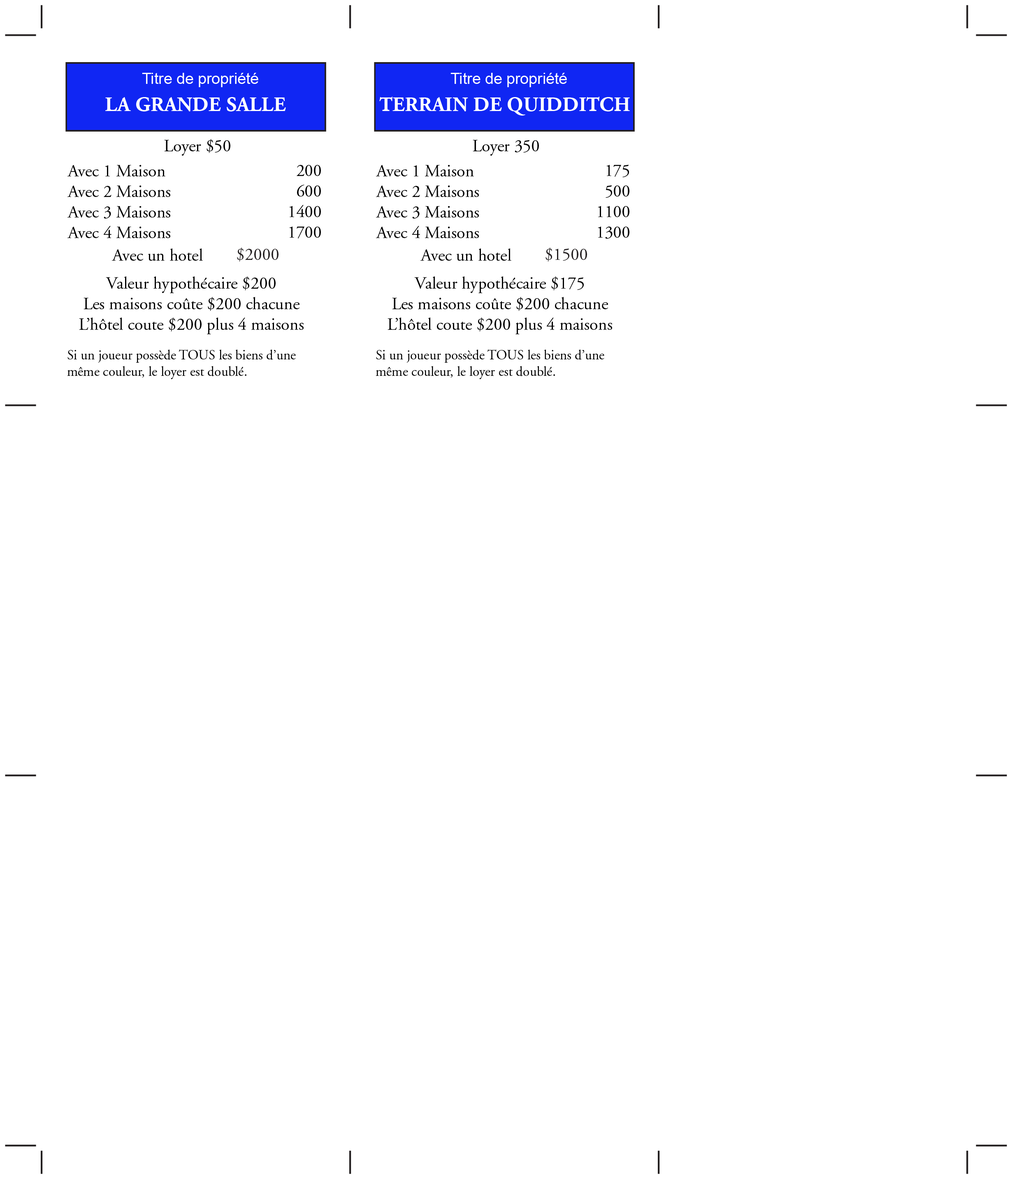
<style>
.page{position:relative;width:1012px;height:1179px;background:#ffffff}
.page>*{position:absolute;margin:0}
.t1{font:17.1px "AGaramond-Regular";color:#000000}
.t2{font:13.7px "AGaramond-Regular";color:#000000}
</style>
<div class="page">
<p class="t1" style="left:164px;top:139px;width:66px;height:17px">Loyer $50</p>
<p class="t1" style="left:472px;top:140px;width:67px;height:16px">Loyer 350</p>
<p class="t1" style="left:67px;top:165px;width:103px;height:73px">Avec 1 Maison<br>Avec 2 Maisons<br>Avec 3 Maisons<br>Avec 4 Maisons</p>
<p class="t1" style="left:289px;top:165px;width:32px;height:73px;text-align:right">200<br>600<br>1400<br>1700</p>
<p class="t1" style="left:376px;top:165px;width:103px;height:73px">Avec 1 Maison<br>Avec 2 Maisons<br>Avec 3 Maisons<br>Avec 4 Maisons</p>
<p class="t1" style="left:597px;top:164px;width:32px;height:75px;text-align:right">175<br>500<br>1100<br>1300</p>
<p class="t1" style="left:112px;top:248px;width:91px;height:13px">Avec un hotel</p>
<p class="t1" style="left:420px;top:248px;width:91px;height:13px">Avec un hotel</p>
<p class="t1" style="left:79px;top:276px;width:224px;height:58px;text-align:center">Valeur hypothécaire $200<br>Les maisons coûte $200 chacune<br>L’hôtel coute $200 plus 4 maisons</p>
<p class="t1" style="left:387px;top:276px;width:225px;height:58px;text-align:center">Valeur hypothécaire $175<br>Les maisons coûte $200 chacune<br>L’hôtel coute $200 plus 4 maisons</p>
<p class="t2" style="left:67px;top:350px;width:229px;height:29px">Si un joueur possède TOUS les biens d’une<br>même couleur, le loyer est doublé.</p>
<p class="t2" style="left:375px;top:350px;width:229px;height:29px">Si un joueur possède TOUS les biens d’une<br>même couleur, le loyer est doublé.</p>
</div>
